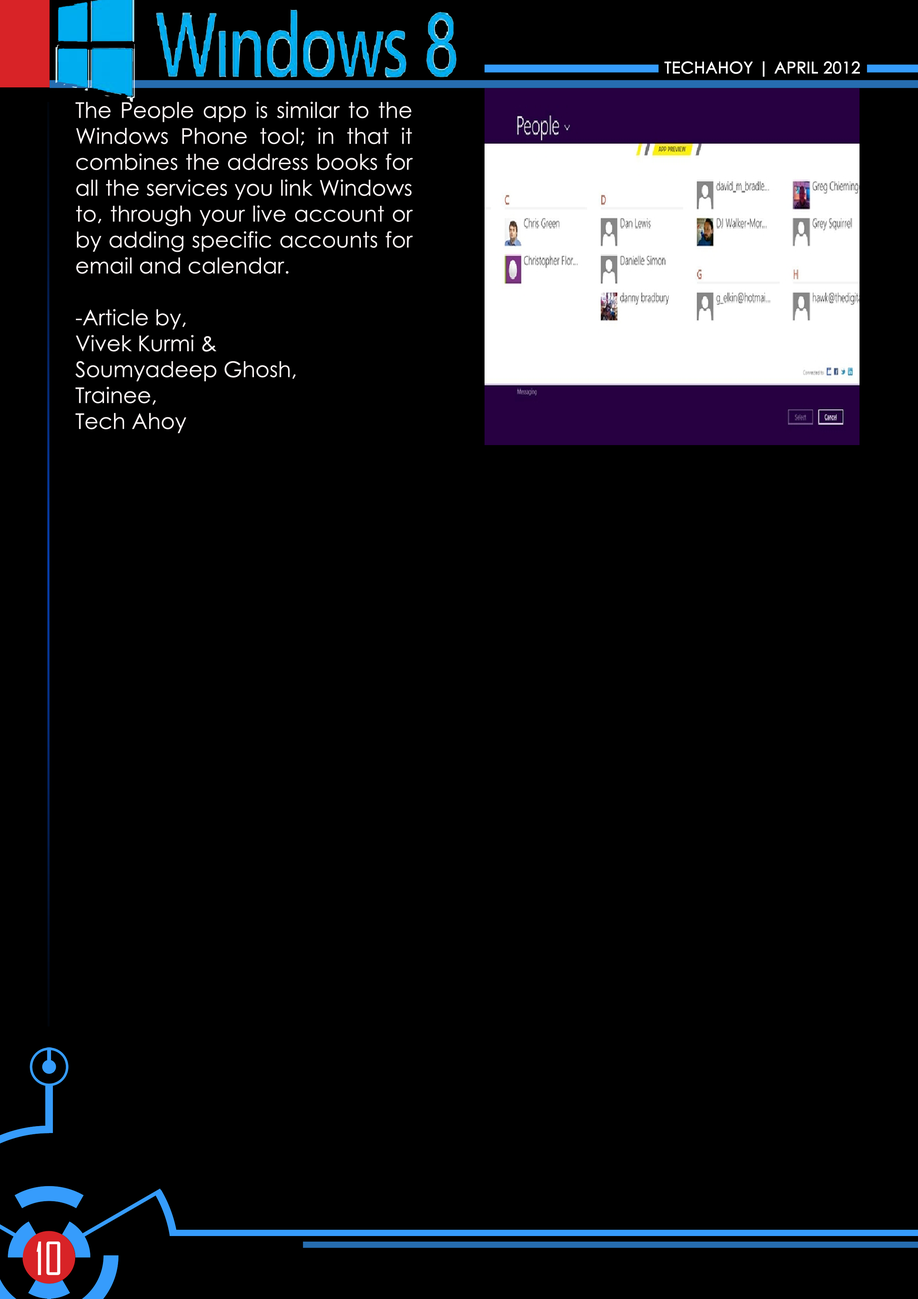
<style>
.page{position:relative;width:918px;height:1299px;background:#000000}
.page>*{position:absolute;margin:0}
.t1{font:16px "CenturyGothic";color:#ffffff;text-transform:uppercase;font-weight:bold}
.t2{font:21.6px "CenturyGothic";color:#fbf5f5}
.t3{font:43.7px "AgencyFB-Reg";color:#ffffff;text-transform:uppercase}
</style>
<div class="page">
<p class="t1" style="left:665px;top:61px;width:195px;height:16px">techahoy | APRIL 2012</p>
<p class="t2" style="left:76px;top:101px;width:337px;height:332px;text-align:justify">The People app is similar to the Windows Phone tool; in that it combines the address books for all the services you link Windows to, through your live account or by adding specific accounts for email and calendar.<br><br>-Article by,<br>Vivek Kurmi &amp;<br>Soumyadeep Ghosh,<br>Trainee,<br>Tech Ahoy</p>
<p class="t3" style="left:37px;top:1241px;width:23px;height:34px">10</p>
</div>
